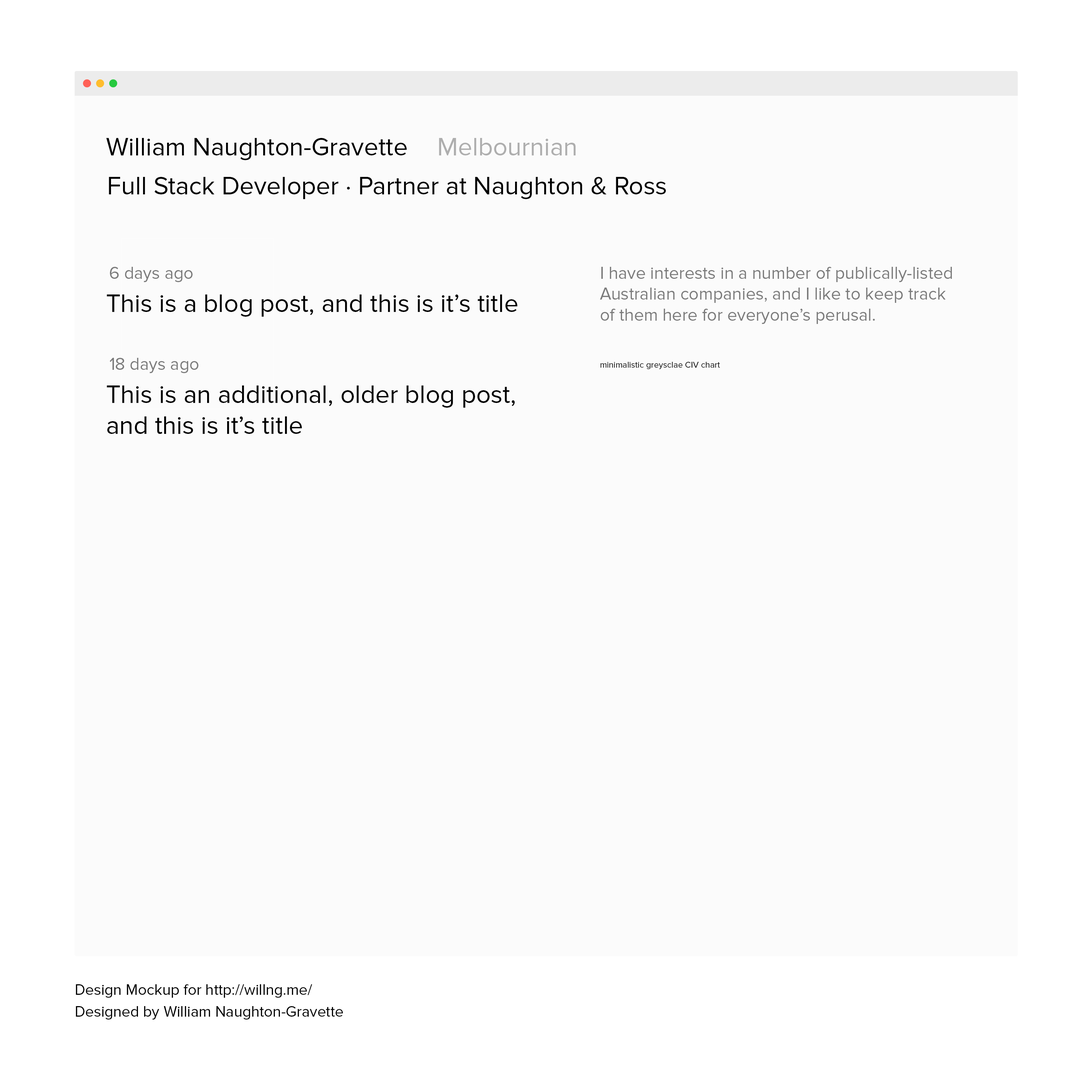
<style>
.page{position:relative;width:1092px;height:1092px;background:#fbfbfb}
.page>*{position:absolute;margin:0}
.t1{font:25.6px "ProximaNova-Regular";color:#000000}
.t2{font:25.6px "ProximaNova-Regular";color:#aeaeae}
.t3{font:17.5px "ProximaNova-Regular";color:#7b7b7b}
.t4{font:8.7px "ProximaNova-Regular";color:#000000}
.t5{font:15.3px "ProximaNova-Regular";color:#000000}
</style>
<div class="page">
<p class="t1" style="left:106px;top:138px;width:301px;height:22px">William Naughton-Gravette</p>
<p class="t2" style="left:439px;top:138px;width:137px;height:17px">Melbournian</p>
<p class="t1" style="left:109px;top:177px;width:557px;height:22px">Full Stack Developer · Partner at Naughton &amp; Ross</p>
<p class="t3" style="left:110px;top:267px;width:83px;height:15px">6 days ago</p>
<p class="t3" style="left:600px;top:267px;width:352px;height:57px">I have interests in a number of publically-listed <br>Australian companies, and I like to keep track <br>of them here for everyone’s perusal.</p>
<p class="t1" style="left:107px;top:294px;width:411px;height:23px">This is a blog post, and this is it’s title</p>
<p class="t3" style="left:110px;top:358px;width:88px;height:15px">18 days ago</p>
<p class="t4" style="left:601px;top:362px;width:119px;height:7px">minimalistic greysclae CIV chart</p>
<p class="t1" style="left:107px;top:385px;width:408px;height:49px">This is an additional, older blog post,<br>and this is it’s title</p>
<p class="t5" style="left:76px;top:984px;width:236px;height:14px">Design Mockup for http://willng.me/</p>
<p class="t5" style="left:76px;top:1006px;width:267px;height:14px">Designed by William Naughton-Gravette</p>
</div>
